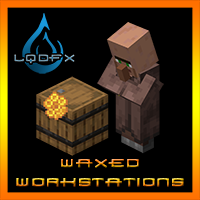
<style>
.page{position:relative;width:200px;height:200px;background:#000000}
.page>*{position:absolute;margin:0}
.t1{font:16px "1979"}
</style>
<div class="page">
<p class="t1" style="left:16px;top:159px;width:168px;height:28px;text-align:center">Waxed<br>Workstations</p>
</div>
